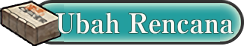
<style>
.page{position:relative;width:244px;height:46px}
.page>*{position:absolute;margin:0}
.t1{font:27px "RyuminPro-ExBold";letter-spacing:-0.02em;color:#fff7f3}
</style>
<div class="page">
<p class="t1" style="left:55px;top:12px;width:179px;height:22px">Ubah Rencana</p>
</div>
